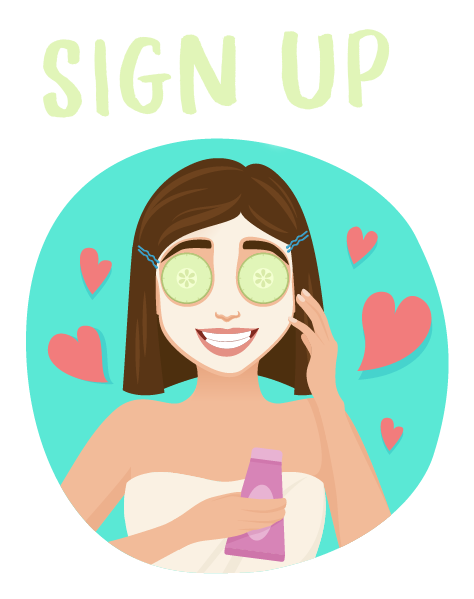
<style>
.page{position:relative;width:474px;height:599px;background:#ffffff}
.page>*{position:absolute;margin:0}
.t1{font:200px "AhoyAmigoDEMO-Regular";color:#e1f5b8}
</style>
<div class="page">
<p class="t1" style="left:43px;top:29px;width:347px;height:90px;rotate:-2deg">SIGN UP</p>
</div>
